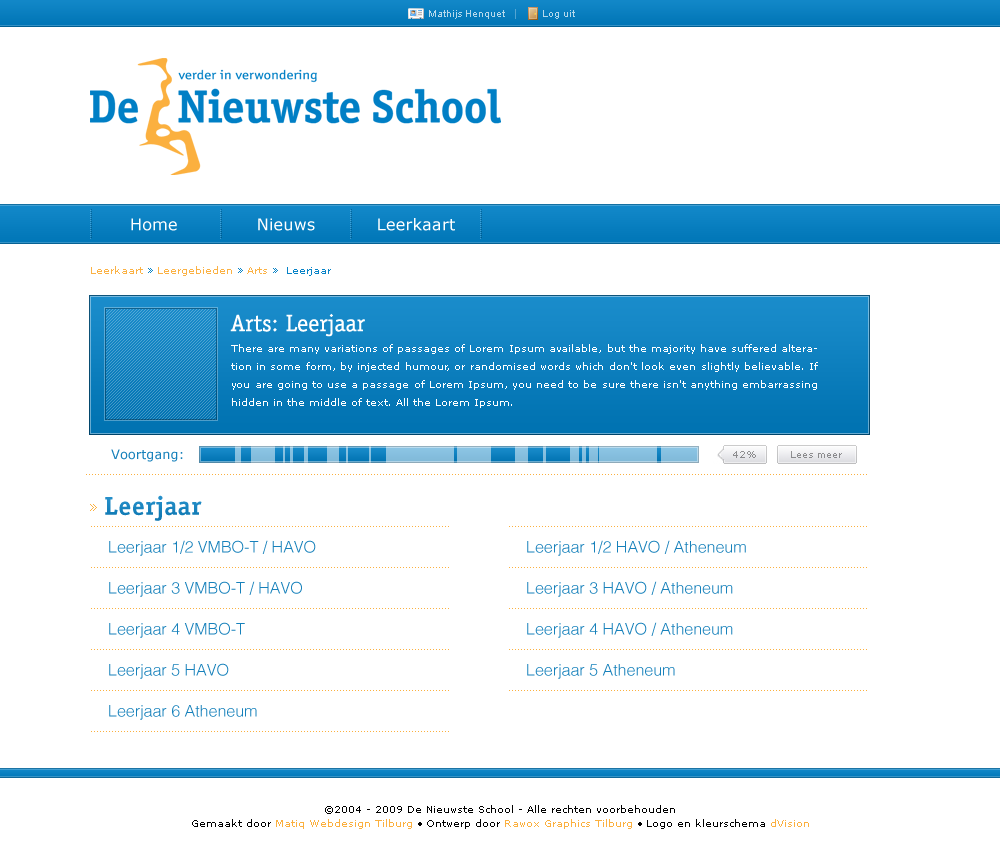
<style>
.page{position:relative;width:1000px;height:860px;background:#ffffff}
.page>*{position:absolute;margin:0}
.t1{font:10px "ArialMT";color:#b5d8ec}
.t2{font:16px "Verdana";letter-spacing:0.015em;color:#ffffff}
.t3{font:10px "Verdana";color:#fbb03f}
.t4{font:10px "Verdana";color:#007fc5}
.t5{font:24px "OfficinaSerifStd-Book";color:#ffffff}
.t6{font:10px/18px "Verdana";color:#ffffff}
.t7{font:13px "Verdana";color:#1781bb}
.t8{font:9px "Verdana";color:#8e8e8f}
.t9{font:9px "Verdana";color:#8c8c8e}
.t10{font:26px "OfficinaSerifStd-Bold";letter-spacing:0.015em;color:#0d83c4}
.t11{font:15px "Verdana";letter-spacing:0.015em;color:#fbb03f}
.t12{font:16px "HelveticaLT-Light";color:#1781bb}
.t13{font:10px/14px "Verdana";color:#000000}
.t14{font:10px/14px "Verdana";color:#fbb03f}
</style>
<div class="page">
<p class="t1" style="left:429px;top:10px;width:76px;height:9px">Mathijs Henquet</p>
<p class="t1" style="left:543px;top:10px;width:32px;height:9px">Log uit</p>
<p class="t2" style="left:131px;top:218px;width:46px;height:13px">Home</p>
<p class="t2" style="left:258px;top:218px;width:57px;height:13px">Nieuws</p>
<p class="t2" style="left:378px;top:218px;width:77px;height:13px">Leerkaart</p>
<p class="t3" style="left:91px;top:266px;width:240px;height:10px;opacity:0.97">Leerkaart <span class="t4">» </span>Leergebieden <span class="t4">» </span>Arts <span class="t4">»  Leerjaar</span></p>
<p class="t5" style="left:230px;top:313px;width:135px;height:24px">Arts: Leerjaar</p>
<p class="t6" style="left:231px;top:344px;width:587px;height:64px;text-align:justify">There are many variations of passages of Lorem Ipsum available, but the majority have suffered alteration in some form, by injected humour, or randomised words which don't look even slightly believable. If you are going to use a passage of Lorem Ipsum, you need to be sure there isn't anything embarrassing hidden in the middle of text. All the Lorem Ipsum.</p>
<p class="t7" style="left:111px;top:449px;width:72px;height:13px">Voortgang:</p>
<p class="t8" style="left:733px;top:451px;width:23px;height:7px">42%</p>
<p class="t9" style="left:791px;top:451px;width:51px;height:7px">Lees meer</p>
<p class="t10" style="left:105px;top:495px;width:97px;height:26px">Leerjaar</p>
<p class="t11" style="left:90px;top:504px;width:7px;height:7px">»</p>
<p class="t12" style="left:109px;top:540px;width:207px;height:16px">Leerjaar 1/2 VMBO-T / HAVO</p>
<p class="t12" style="left:527px;top:540px;width:219px;height:16px">Leerjaar 1/2 HAVO / Atheneum</p>
<p class="t12" style="left:109px;top:581px;width:193px;height:16px">Leerjaar 3 VMBO-T / HAVO</p>
<p class="t12" style="left:527px;top:581px;width:206px;height:16px">Leerjaar 3 HAVO / Atheneum</p>
<p class="t12" style="left:109px;top:622px;width:136px;height:16px">Leerjaar 4 VMBO-T</p>
<p class="t12" style="left:527px;top:622px;width:206px;height:16px">Leerjaar 4 HAVO / Atheneum</p>
<p class="t12" style="left:109px;top:663px;width:120px;height:16px">Leerjaar 5 HAVO</p>
<p class="t12" style="left:527px;top:664px;width:148px;height:15px">Leerjaar 5 Atheneum</p>
<p class="t12" style="left:109px;top:705px;width:148px;height:15px">Leerjaar 6 Atheneum</p>
<p class="t13" style="left:192px;top:805px;width:617px;height:24px;text-align:center">©2004 - 2009 De Nieuwste School - Alle rechten voorbehouden<br>Gemaakt door <span class="t14">Matiq Webdesign Tilburg</span> • Ontwerp door <span class="t14">Rawox Graphics Tilburg</span> • Logo en kleurschema <span class="t14">dVision</span></p>
</div>
